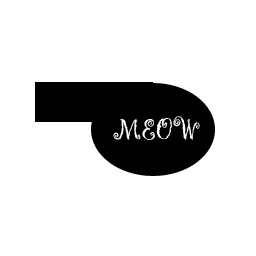
<style>
.page{position:relative;width:256px;height:256px;background:#ffffff}
.page>*{position:absolute;margin:0}
.t1{font:30px "Gigi-Regular";color:#ffffff}
</style>
<div class="page">
<p class="t1" style="left:113px;top:116px;width:87px;height:24px">MEOW</p>
</div>
